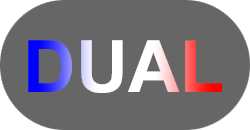
<style>
.page{position:relative;width:250px;height:130px;background:#666666}
.page>*{position:absolute;margin:0}
.t1{font:72.2px "Arial-BoldMT"}
</style>
<div class="page">
<p class="t1" style="left:28px;top:40px;width:194px;height:53px">DUAL</p>
</div>
